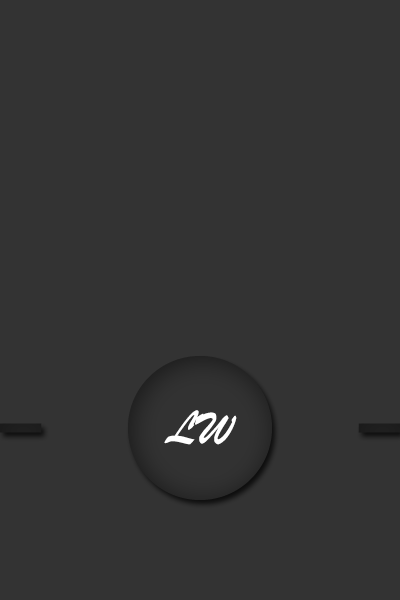
<style>
.page{position:relative;width:400px;height:600px;background:#333333}
.page>*{position:absolute;margin:0}
.t1{font:50px "BrushScriptMT";color:#ffffff}
</style>
<div class="page">
<p class="t1" style="left:164px;top:410px;width:73px;height:35px">LW</p>
</div>
